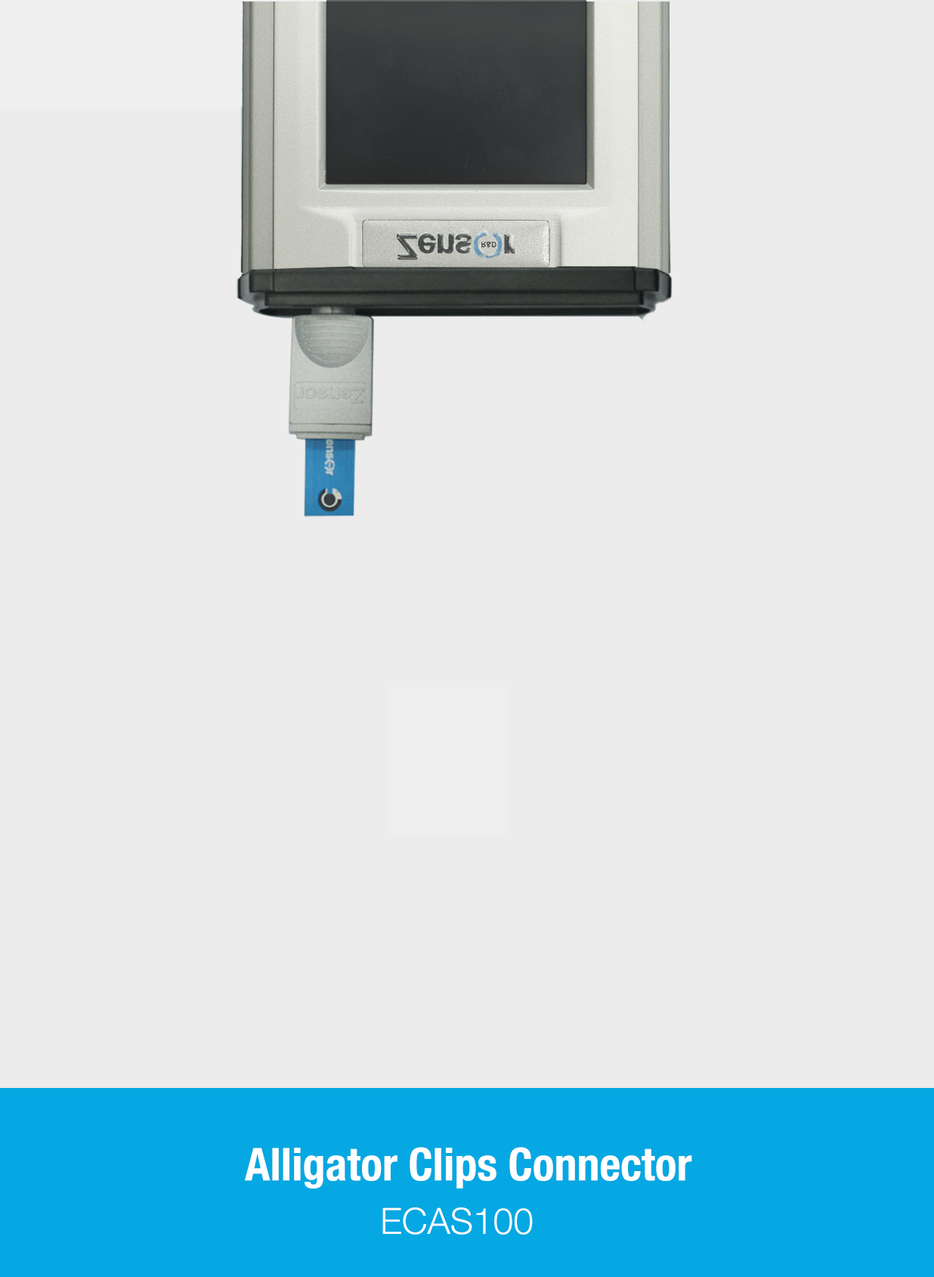
<style>
.page{position:relative;width:934px;height:1277px;background:#ececec}
.page>*{position:absolute;margin:0}
.t1{font:45.3px "HelveticaNeue-CondensedBold";color:#ffffff}
.t2{font:36.3px "HelveticaNeue-Light";color:#ffffff}
</style>
<div class="page">
<p class="t1" style="left:245px;top:1147px;width:447px;height:41px">Alligator Clips Connector</p>
<p class="t2" style="left:382px;top:1207px;width:151px;height:27px">ECAS100</p>
</div>
